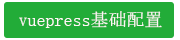
<style>
.page{position:relative;width:180px;height:40px;background:#22ac38}
.page>*{position:absolute;margin:0}
.t1{font:18px "SimSun";color:#fff6f6}
</style>
<div class="page">
<p class="t1" style="left:19px;top:11px;width:143px;height:17px">vuepress基础配置</p>
</div>
